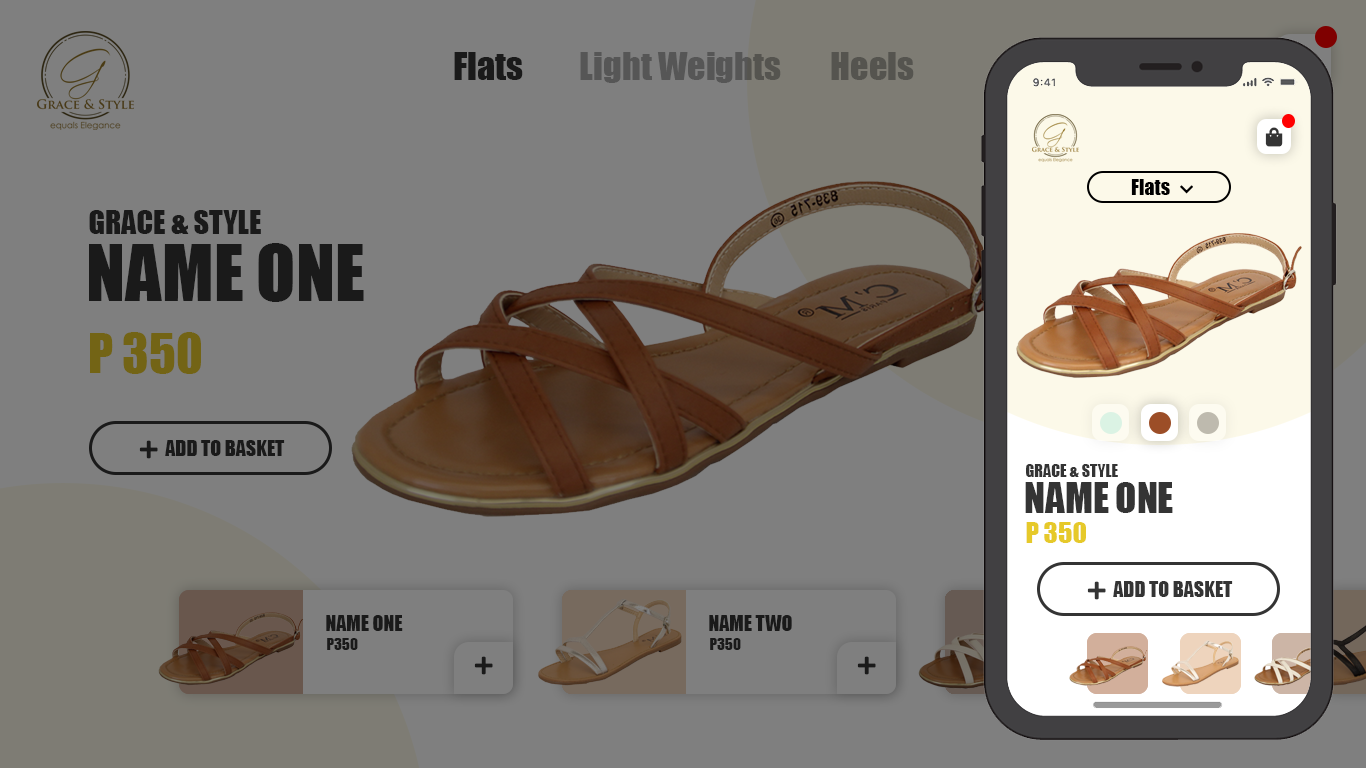
<style>
.page{position:relative;width:1366px;height:768px;background:#7f7f7f}
.page>*{position:absolute;margin:0}
.t1{font:36px "Impact";color:#1a1a1a}
.t2{font:36px "Impact";color:#565656}
.t3{font:36px "Impact";color:#55544f}
.t4{font:20px "Impact";color:#000000}
.t5{font:30px "Impact";color:#1a1a1a}
.t6{font:72px "Impact";color:#1a1a1a}
.t7{font:50px "Impact";color:#736415}
.t8{font:20px "Impact";color:#1a1a1a}
.t9{font:16.1px "Impact";color:#343434}
.t10{font:38.8px "Impact";color:#343434}
.t11{font:26.9px "Impact";color:#e6c92a}
.t12{font:20px "Impact";color:#343434}
.t13{font:15px "Impact";color:#1a1a1a}
</style>
<div class="page">
<p class="t1" style="left:454px;top:52px;width:69px;height:28px">Flats</p>
<p class="t2" style="left:580px;top:52px;width:201px;height:31px">Light Weights</p>
<p class="t3" style="left:831px;top:52px;width:83px;height:28px">Heels</p>
<p class="t4" style="left:1131px;top:179px;width:39px;height:16px">Flats</p>
<p class="t5" style="left:89px;top:210px;width:172px;height:24px">GRACE &amp; STYLE</p>
<p class="t6" style="left:89px;top:243px;width:275px;height:59px">NAME ONE</p>
<p class="t7" style="left:90px;top:332px;width:111px;height:42px">P 350</p>
<p class="t8" style="left:165px;top:440px;width:120px;height:16px">ADD TO BASKET</p>
<p class="t9" style="left:1026px;top:464px;width:92px;height:13px">GRACE &amp; STYLE</p>
<p class="t10" style="left:1025px;top:482px;width:148px;height:31px">NAME ONE</p>
<p class="t11" style="left:1026px;top:522px;width:60px;height:21px">P 350</p>
<p class="t12" style="left:1113px;top:581px;width:120px;height:16px">ADD TO BASKET</p>
<p class="t8" style="left:326px;top:615px;width:77px;height:16px">NAME ONE</p>
<p class="t8" style="left:709px;top:615px;width:83px;height:16px">NAME TWO</p>
<p class="t13" style="left:327px;top:638px;width:31px;height:12px">P350</p>
<p class="t13" style="left:710px;top:638px;width:31px;height:12px">P350</p>
</div>
